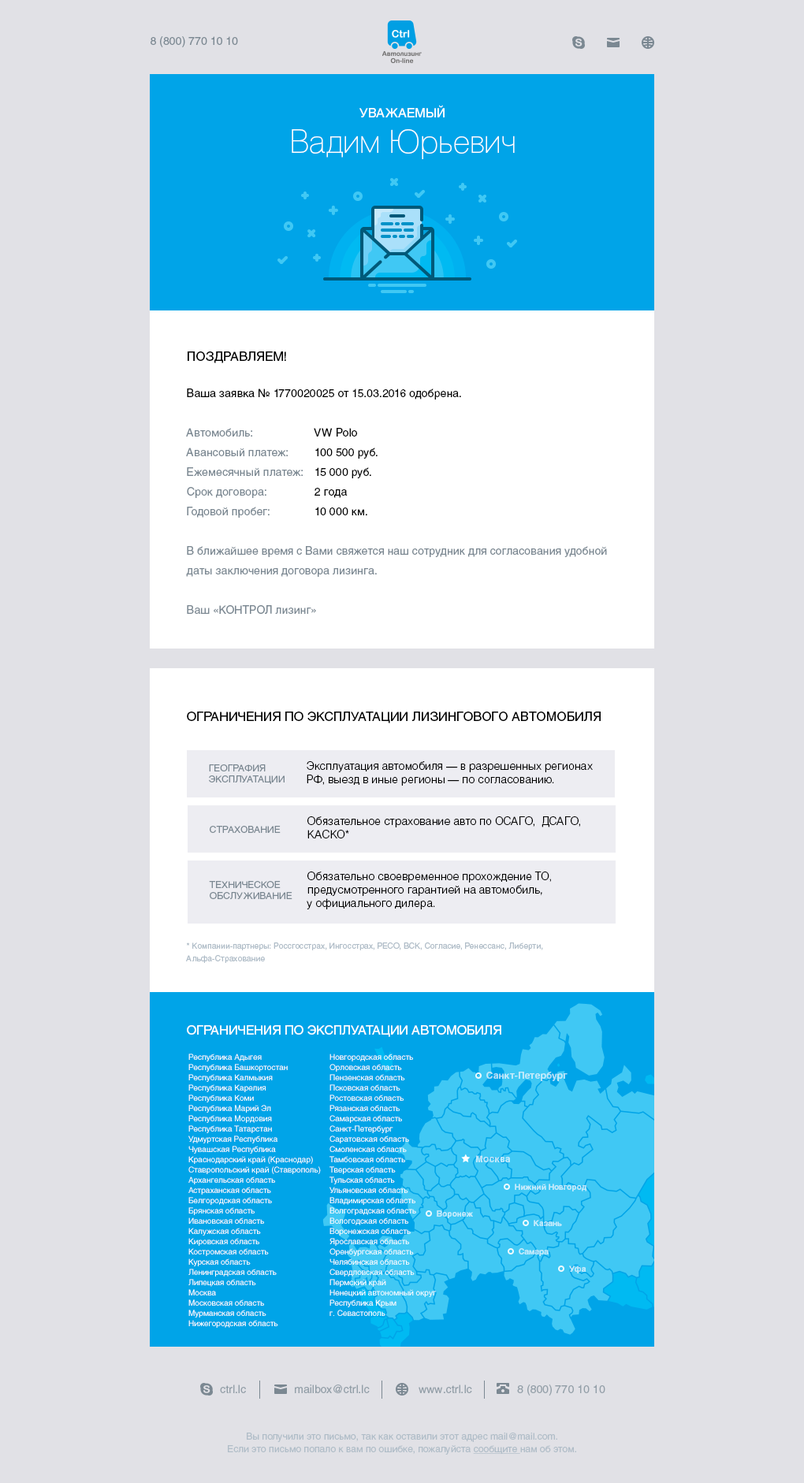
<style>
.page{position:relative;width:804px;height:1483px;background:#e1e1e6}
.page>*{position:absolute;margin:0}
.t1{font:11px "HeliosC";color:#7b8892}
.t2{font:31.5px/35.5px "HeliosThinC";color:#ffffff}
.t3{font:12.6px/35.5px "HeliosC";color:#ffffff;text-transform:uppercase}
.t4{font:12.6px "HeliosC";color:#000000;text-transform:uppercase}
.t5{font:11px/19.7px "HeliosC";color:#7b8892}
.t6{font:11px/19.7px "HeliosC";color:#000000}
.t7{font:11px "HeliosLightC";color:#000000}
.t8{font:9.5px "HeliosC";color:#7b8892;text-transform:uppercase}
.t9{font:7.9px/12.6px "HeliosC";color:#b0bdc8}
.t10{font:12.6px "HeliosC";color:#ffffff;text-transform:uppercase}
.t11{font:7.9px/10.2px "HeliosC";color:#ffffff}
.t12{font:9.5px "HeliosC-Bold";color:#c4ebfb}
.t13{font:7.9px "HeliosC-Bold";color:#c4ebfb}
.t14{font:11px "HeliosC";color:#939fa8}
.t15{font:9.5px/12.6px "HeliosC";color:#b0bdc8}
.t16{font:9.5px/12.6px "HeliosC";color:#b0bdc8;text-decoration:underline}
</style>
<div class="page">
<p class="t1" style="left:151px;top:36px;width:87px;height:11px">8 (800) 770 10 10</p>
<p class="t2" style="left:292px;top:105px;width:223px;height:54px;text-align:center"><span class="t3">Уважаемый<br></span>Вадим Юрьевич</p>
<p class="t4" style="left:188px;top:352px;width:98px;height:11px">Поздравляем!</p>
<p class="t5" style="left:186px;top:389px;width:421px;height:225px"><span class="t6">Ваша заявка № 1770020025 от 15.03.2016 одобрена.<br></span><br>Автомобиль:<br>Авансовый платеж:<br>Ежемесячный платеж:<br>Срок договора:<br>Годовой пробег:<br><br>В ближайшее время с Вами свяжется наш сотрудник для согласования удобной даты заключения договора лизинга.<br><br>Ваш «КОНТРОЛ лизинг»</p>
<p class="t6" style="left:314px;top:428px;width:64px;height:87px">VW Polo<br>100 500 руб.<br>15 000 руб.<br>2 года<br>10 000 км.</p>
<p class="t4" style="left:187px;top:712px;width:414px;height:12px">Ограничения по эксплуатации ЛИЗИНГОВОГО автомобиля</p>
<p class="t7" style="left:307px;top:761px;width:286px;height:25px">Эксплуатация автомобиля — в разрешенных регионах РФ, выезд в иные регионы — по согласованию.</p>
<p class="t8" style="left:209px;top:765px;width:76px;height:19px">География<br>эксплуатации</p>
<p class="t7" style="left:307px;top:817px;width:273px;height:22px">Обязательное страхование авто по ОСАГО,  ДСАГО, КАСКО*</p>
<p class="t8" style="left:210px;top:826px;width:71px;height:7px">Страхование</p>
<p class="t8" style="left:209px;top:881px;width:83px;height:18px">Техническое обслуживание</p>
<p class="t7" style="left:307px;top:872px;width:244px;height:38px">Обязательно своевременное прохождение ТО, предусмотренного гарантией на автомобиль, <br>у официального дилера.</p>
<p class="t9" style="left:186px;top:943px;width:357px;height:20px">* Компании-партнеры: Россгосстрах, Ингосстрах, РЕСО, ВСК, Согласие, Ренессанс, Либерти, Альфа-Страхование</p>
<p class="t10" style="left:187px;top:1025px;width:314px;height:12px">Ограничения по эксплуатации автомобиля</p>
<p class="t11" style="left:188px;top:1054px;width:133px;height:274px">Республика Адыгея<br>Республика Башкортостан<br>Республика Калмыкия<br>Республика Карелия<br>Республика Коми<br>Республика Марий Эл<br>Республика Мордовия<br>Республика Татарстан<br>Удмуртская Республика<br>Чувашская Республика<br>Краснодарский край (Краснодар)<br>Ставропольский край (Ставрополь)<br>Архангельская область<br>Астраханская область<br>Белгородская область<br>Брянская область<br>Ивановская область<br>Калужская область<br>Кировская область<br>Костромская область<br>Курская область<br>Ленинградская область<br>Липецкая область<br>Москва<br>Московская область<br>Мурманская область<br>Нижегородская область</p>
<p class="t11" style="left:329px;top:1054px;width:107px;height:262px">Новгородская область<br>Орловская область<br>Пензенская область<br>Псковская область<br>Ростовская область<br>Рязанская область<br>Самарская область<br>Санкт-Петербург<br>Саратовская область<br>Смоленская область<br>Тамбовская область<br>Тверская область<br>Тульская область<br>Ульяновская область<br>Владимирская область<br>Волгоградская область<br>Вологодская область<br>Воронежская область<br>Ярославская область<br>Оренбургская область<br>Челябинская область<br>Свердловская область<br>Пермский край<br>Ненецкий автономный округ<br>Республика Крым<br>г. Севастополь</p>
<p class="t12" style="left:486px;top:1072px;width:81px;height:9px">Санкт-Петербург</p>
<p class="t12" style="left:476px;top:1155px;width:34px;height:8px">Москва</p>
<p class="t13" style="left:515px;top:1184px;width:71px;height:8px">Нижний Новгород</p>
<p class="t13" style="left:437px;top:1211px;width:36px;height:7px">Воронеж</p>
<p class="t13" style="left:534px;top:1220px;width:28px;height:6px">Казань</p>
<p class="t13" style="left:519px;top:1248px;width:30px;height:8px">Самара</p>
<p class="t13" style="left:569px;top:1266px;width:17px;height:8px">Уфа</p>
<p class="t14" style="left:220px;top:1385px;width:26px;height:8px">ctrl.lc</p>
<p class="t14" style="left:295px;top:1385px;width:75px;height:8px">mailbox@ctrl.lc</p>
<p class="t14" style="left:419px;top:1385px;width:53px;height:8px">www.ctrl.lc</p>
<p class="t14" style="left:517px;top:1385px;width:88px;height:11px">8 (800) 770 10 10</p>
<p class="t15" style="left:228px;top:1433px;width:348px;height:22px;text-align:center">Вы получили это письмо, так как оставили этот адрес mail@mail.com.<br>Если это письмо попало к вам по ошибке, пожалуйста <span class="t16">сообщите </span>нам об этом.</p>
</div>
